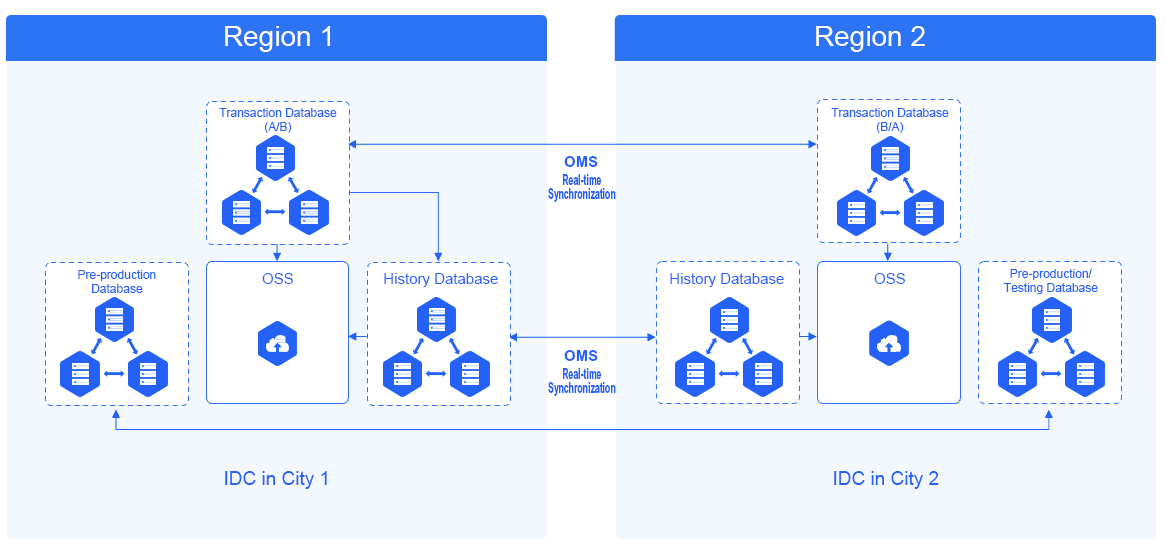
<style>
.page{position:relative;width:1166px;height:553px;background:#f3f8ff}
.page>*{position:absolute;margin:0}
.t1{font:28px "ArialMT";color:#ffffff}
.t2{font:12px/14px "ArialMT";color:#2661f7}
.t3{font:15px "Arial-BoldMT";color:#2661f7}
.t4{font:15px/14px "Arial-BoldMT";color:#2661f7;scale:0.58 1}
.t5{font:15px "ArialMT";color:#2661f7}
.t6{font:19px "ArialMT";color:#2661f7}
</style>
<div class="page">
<p class="t1" style="left:225px;top:26px;width:105px;height:26px">Region 1</p>
<p class="t1" style="left:816px;top:26px;width:109px;height:26px">Region 2</p>
<p class="t2" style="left:219px;top:108px;width:118px;height:25px;text-align:center">Transaction Database<br>(A/B)</p>
<p class="t2" style="left:831px;top:108px;width:118px;height:25px;text-align:center">Transaction Database<br>(B/A)</p>
<p class="t3" style="left:564px;top:156px;width:34px;height:11px">OMS</p>
<p class="t4" style="left:548px;top:174px;width:68px;height:28px;text-align:center">Real-time<br>Synchronization</p>
<p class="t2" style="left:78px;top:270px;width:78px;height:23px;text-align:center">Pre-production<br>Database</p>
<p class="t2" style="left:1003px;top:269px;width:95px;height:25px;text-align:center">Pre-production/<br>Testing Database</p>
<p class="t5" style="left:262px;top:273px;width:31px;height:11px">OSS</p>
<p class="t5" style="left:384px;top:273px;width:114px;height:14px">History Database</p>
<p class="t5" style="left:670px;top:273px;width:114px;height:14px">History Database</p>
<p class="t5" style="left:874px;top:273px;width:31px;height:11px">OSS</p>
<p class="t3" style="left:564px;top:350px;width:34px;height:11px">OMS</p>
<p class="t4" style="left:548px;top:368px;width:68px;height:28px;text-align:center">Real-time<br>Synchronization</p>
<p class="t6" style="left:225px;top:471px;width:102px;height:18px">IDC in City 1</p>
<p class="t6" style="left:834px;top:471px;width:105px;height:18px">IDC in City 2</p>
</div>
